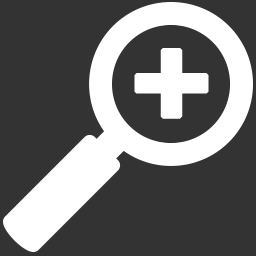
<style>
.page{position:relative;width:256px;height:256px;background:#333333}
.page>*{position:absolute;margin:0}
.t1{font:147.3px "BreezeSans-Bold";color:#ffffff;font-weight:bold;scale:1.05 1}
</style>
<div class="page">
<p class="t1" style="left:134px;top:48px;width:75px;height:71px">+</p>
</div>
